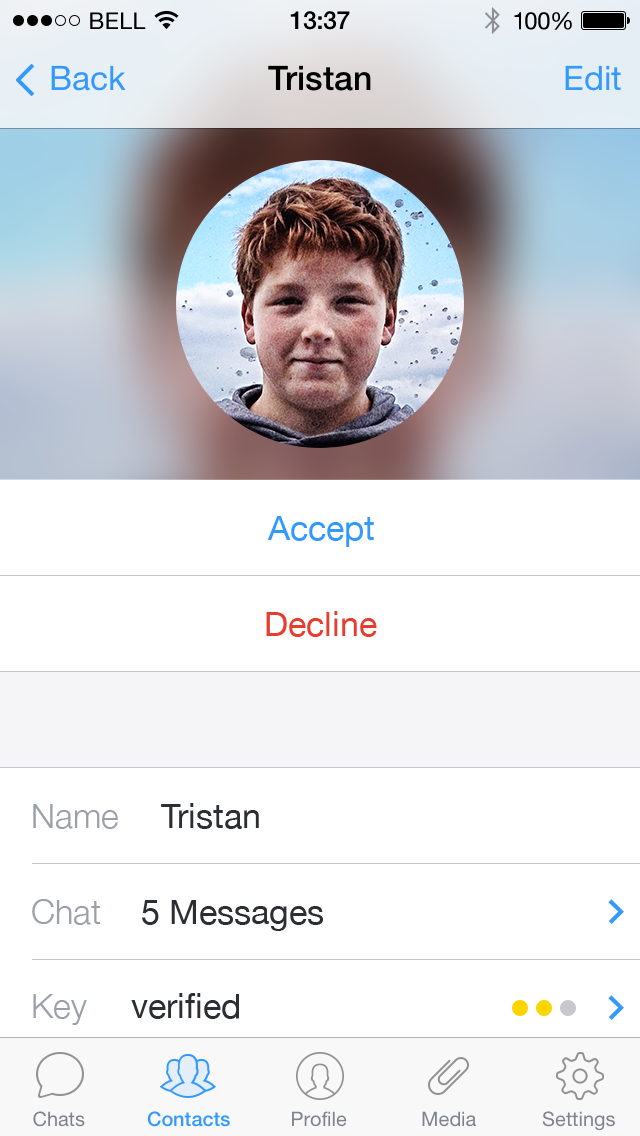
<style>
.page{position:relative;width:640px;height:1136px;background:#ffffff}
.page>*{position:absolute;margin:0}
.t1{font:33.8px "HelveticaNeue";color:#3399ff}
.t2{font:33.8px "HelveticaNeue-Medium";color:#000000}
.t3{font:34px "HelveticaNeue";color:#3399ff}
.t4{font:34px "HelveticaNeue";color:#e63d2e}
.t5{font:34px "HelveticaNeue-Light";color:#9b9fa8}
.t6{font:34px "HelveticaNeue";color:#2b2e33}
</style>
<div class="page">
<p class="t1" style="left:51px;top:65px;width:75px;height:26px">Back</p>
<p class="t2" style="left:268px;top:65px;width:103px;height:26px">Tristan</p>
<p class="t1" style="left:565px;top:65px;width:56px;height:26px">Edit</p>
<p class="t3" style="left:267px;top:516px;width:107px;height:31px">Accept</p>
<p class="t4" style="left:266px;top:611px;width:111px;height:26px">Decline</p>
<p class="t5" style="left:33px;top:804px;width:85px;height:25px">Name</p>
<p class="t6" style="left:161px;top:803px;width:98px;height:26px">Tristan</p>
<p class="t5" style="left:32px;top:899px;width:69px;height:26px">Chat</p>
<p class="t6" style="left:142px;top:900px;width:181px;height:31px">5 Messages</p>
<p class="t5" style="left:33px;top:994px;width:54px;height:31px">Key</p>
<p class="t6" style="left:131px;top:993px;width:108px;height:26px">verified</p>
</div>
